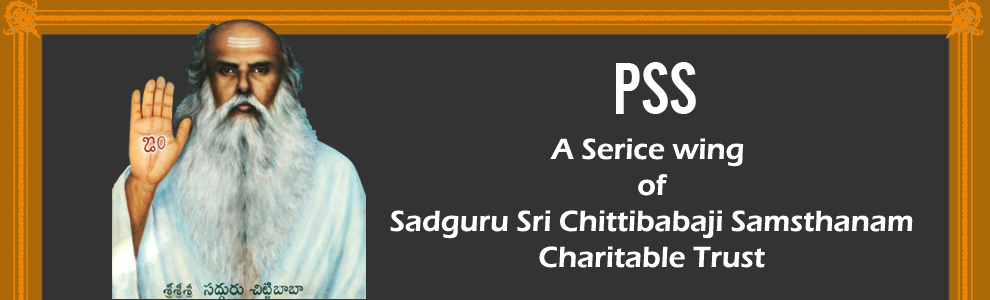
<style>
.page{position:relative;width:990px;height:300px;background:#333333}
.page>*{position:absolute;margin:0}
.t1{font:72px "AlternateGothicNo2BT-Regular";color:#fefefe}
.t2{font:30px "ErasITC-Demi";color:#fefefe}
</style>
<div class="page">
<p class="t1" style="left:616px;top:62px;width:80px;height:52px">PSS</p>
<p class="t2" style="left:390px;top:138px;width:523px;height:130px;text-align:center">A Serice wing<br> of<br> Sadguru Sri Chittibabaji Samsthanam<br> Charitable Trust</p>
</div>
